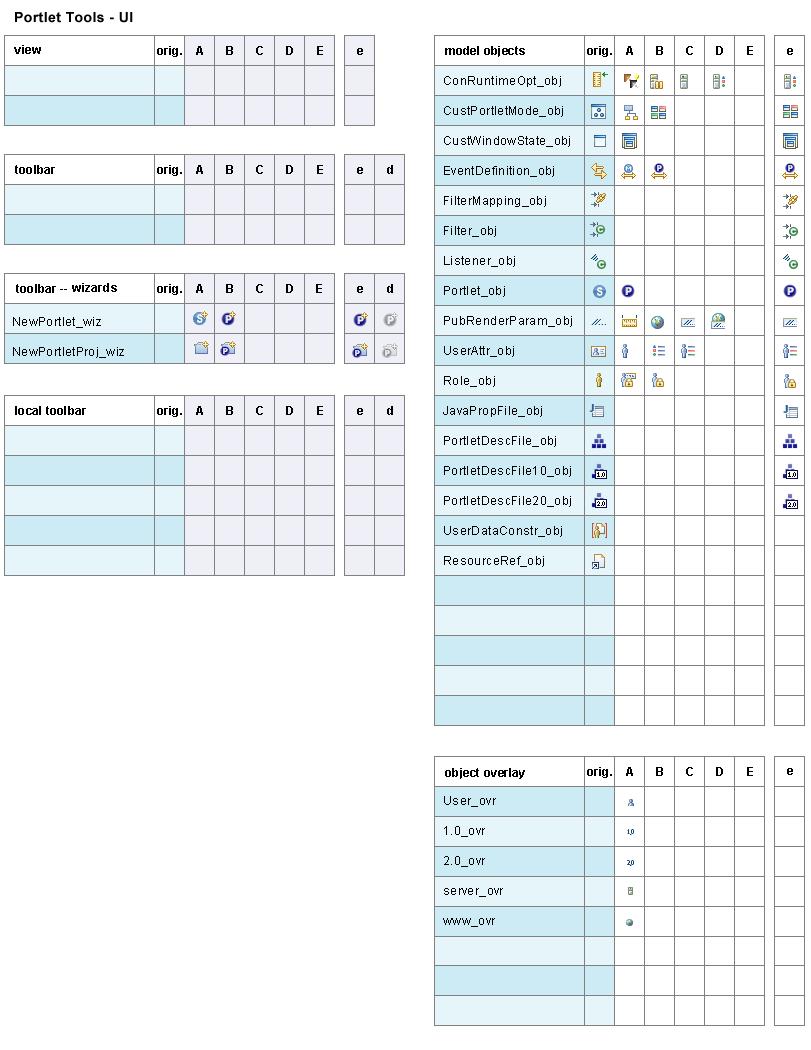
<style>
.page{position:relative;width:811px;height:1050px;background:#ffffff}
.page>*{position:absolute;margin:0}
.t1{font:14px "Arial-BoldMT";letter-spacing:0.03em;color:#000000}
.t2{font:12px/30px "ArialMT";letter-spacing:0.03em;color:#000000}
</style>
<div class="page">
<p class="t1" style="left:15px;top:12px;width:118px;height:11px">Portlet Tools - UI</p>
<p class="t2" style="left:443px;top:76px;width:129px;height:851px">ConRuntimeOpt_obj<br>CustPortletMode_obj<br>CustWindowState_obj<br>EventDefinition_obj<br>FilterMapping_obj<br>Filter_obj<br>Listener_obj<br>Portlet_obj<br>PubRenderParam_obj<br>UserAttr_obj<br>Role_obj<br>JavaPropFile_obj<br>PortletDescFile_obj<br>PortletDescFile10_obj<br>PortletDescFile20_obj<br>UserDataConstr_obj<br>ResourceRef_obj<br><br><br><br><br><br><br><br>User_ovr<br>1.0_ovr<br>2.0_ovr<br>server_ovr<br>www_ovr</p>
<p class="t2" style="left:13px;top:317px;width:111px;height:41px">NewPortlet_wiz<br>NewPortletProj_wiz</p>
</div>
